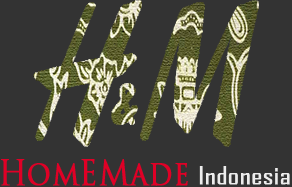
<style>
.page{position:relative;width:292px;height:187px;background:#333333}
.page>*{position:absolute;margin:0}
.t1{font:33.3px "TrajanPro3-Regular";color:#e00026;font-weight:bold;scale:0.88 1}
.t2{font:24.2px "AgencyFB-Reg";color:#ededed;font-weight:bold;scale:1.19 1}
</style>
<div class="page">
<p class="t1" style="left:1px;top:159px;width:187px;height:27px">HomEMade</p>
<p class="t2" style="left:199px;top:166px;width:91px;height:19px">Indonesia</p>
</div>
